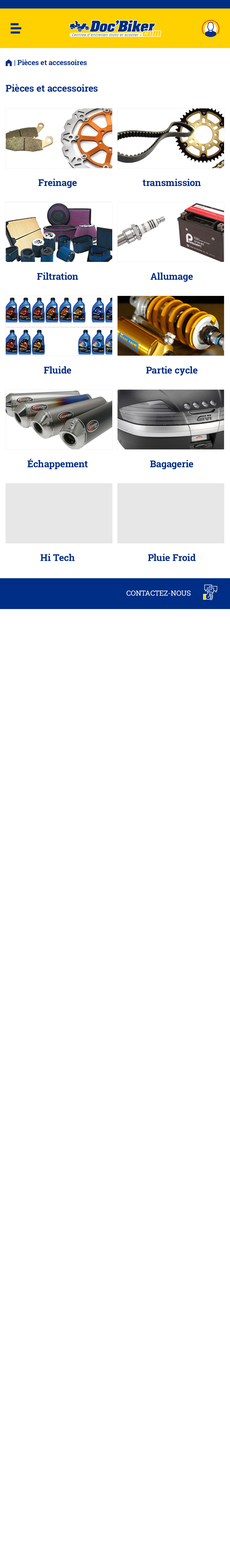
<style>
.page{position:relative;width:230px;height:1568px;background:#ffffff}
.page>*{position:absolute;margin:0}
.t1{font:7.1px "RobotoSlab-Bold";color:#002e86}
.t2{font:7.1px "FoundationIconsGeneral-Reg";color:#002e86}
.t3{font:9.5px "RobotoSlab-Bold";color:#002e86}
.t4{font:7.1px "RobotoSlab-Regular";color:#ffffff;text-transform:uppercase}
</style>
<div class="page">
<p class="t1" style="left:6px;top:59px;width:81px;height:7px"><span class="t2">m </span>| Pièces et accessoires</p>
<p class="t3" style="left:6px;top:84px;width:92px;height:8px">Pièces et accessoires</p>
<p class="t3" style="left:38px;top:179px;width:39px;height:9px">Freinage</p>
<p class="t3" style="left:142px;top:179px;width:58px;height:7px">transmission</p>
<p class="t3" style="left:37px;top:273px;width:41px;height:7px">Filtration</p>
<p class="t3" style="left:150px;top:273px;width:42px;height:9px">Allumage</p>
<p class="t3" style="left:44px;top:366px;width:27px;height:8px">Fluide</p>
<p class="t3" style="left:146px;top:366px;width:51px;height:10px">Partie cycle</p>
<p class="t3" style="left:27px;top:459px;width:61px;height:10px">Échappement</p>
<p class="t3" style="left:150px;top:460px;width:43px;height:9px">Bagagerie</p>
<p class="t3" style="left:40px;top:554px;width:35px;height:7px">Hi Tech</p>
<p class="t3" style="left:148px;top:554px;width:47px;height:7px">Pluie Froid</p>
<p class="t4" style="left:126px;top:591px;width:64px;height:5px">contactez-nous</p>
</div>
